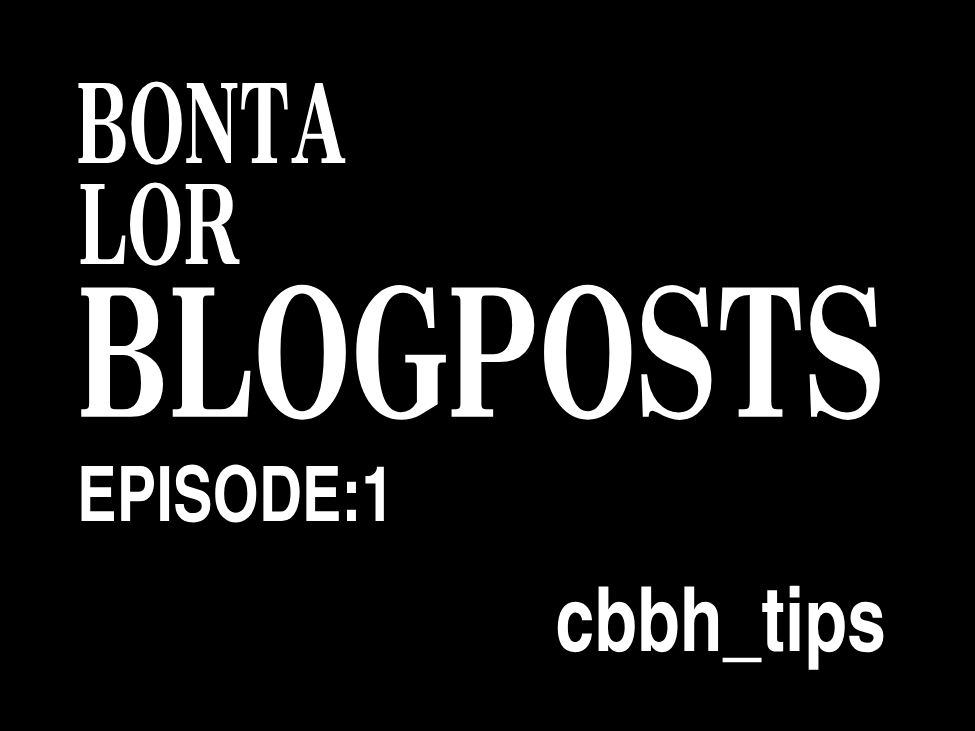
<style>
.page{position:relative;width:975px;height:731px;background:#000000}
.page>*{position:absolute;margin:0}
.t1{font:97px "NIS-M9P-83pv-RKSJ-H";color:#ffffff;scale:0.7 1}
.t2{font:157px "NIS-M9P-83pv-RKSJ-H";color:#ffffff;scale:0.75 1}
.t3{font:76.5px "Helvetica-NarrowBold";color:#ffffff;scale:0.78 1}
.t4{font:90px "Helvetica-NarrowBold";color:#ffffff;scale:0.78 1}
</style>
<div class="page">
<p class="t1" style="left:78px;top:81px;width:268px;height:84px">BONTA</p>
<p class="t1" style="left:80px;top:182px;width:160px;height:84px">LOR</p>
<p class="t2" style="left:81px;top:284px;width:799px;height:136px">BLOGPOSTS</p>
<p class="t3" style="left:81px;top:464px;width:303px;height:59px">EPISODE:1</p>
<p class="t4" style="left:557px;top:585px;width:327px;height:85px">cbbh_tips</p>
</div>
